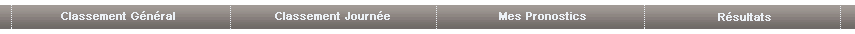
<style>
.page{position:relative;width:855px;height:34px;background:#ffffff}
.page>*{position:absolute;margin:0}
.t1{font:11px "ArialMT";color:#ebf0f5;font-weight:bold}
</style>
<div class="page">
<p class="t1" style="left:61px;top:11px;width:114px;height:9px">Classement Général</p>
<p class="t1" style="left:275px;top:11px;width:115px;height:9px">Classement Journée</p>
<p class="t1" style="left:499px;top:12px;width:87px;height:8px">Mes Pronostics</p>
<p class="t1" style="left:718px;top:12px;width:53px;height:9px">Résultats</p>
</div>
